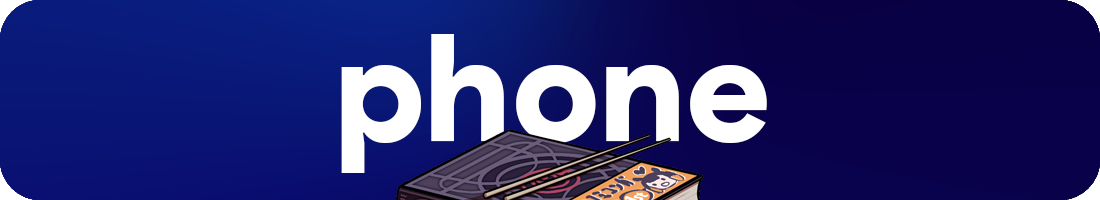
<style>
.page{position:relative;width:1100px;height:200px}
.page>*{position:absolute;margin:0}
.t1{font:150px "ProductSans-Black";color:#ffffff}
</style>
<div class="page">
<p class="t1" style="left:341px;top:34px;width:426px;height:139px">phone</p>
</div>
